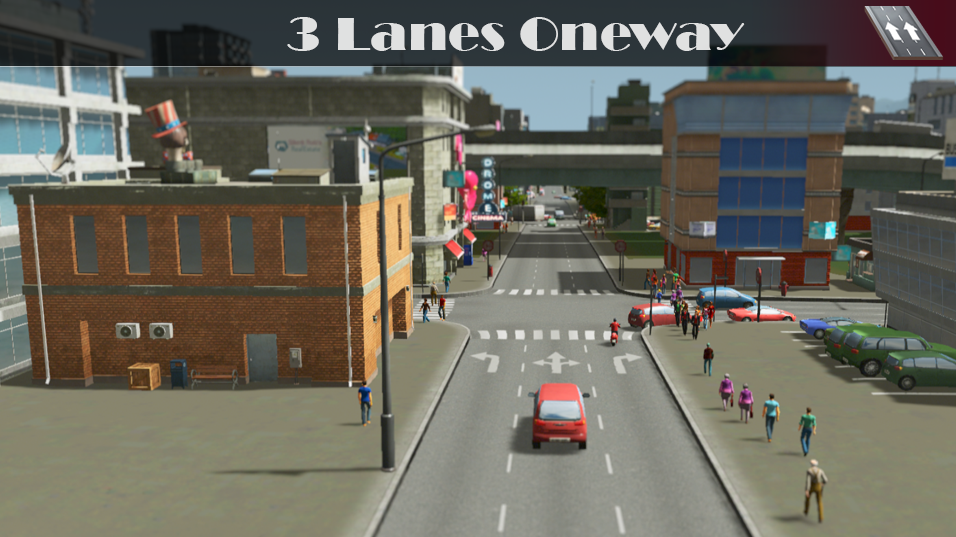
<style>
.page{position:relative;width:956px;height:537px}
.page>*{position:absolute;margin:0}
.t1{font:48px "Broadway";color:#e0e1e1;scale:1.11 1}
</style>
<div class="page">
<p class="t1" style="left:287px;top:17px;width:458px;height:34px">3 Lanes Oneway</p>
</div>
